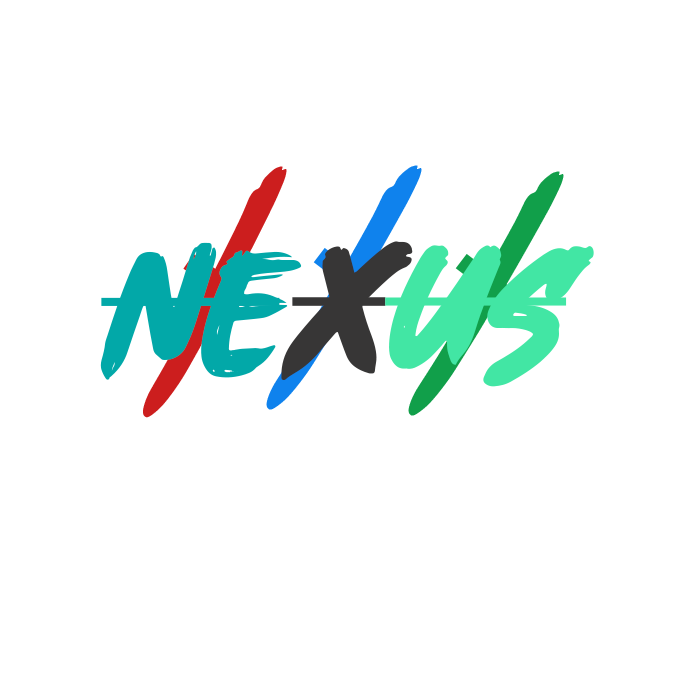
<style>
.page{position:relative;width:700px;height:700px;background:#ffffff}
.page>*{position:absolute;margin:0}
.t1{font:359.6px "Wkwkwk";color:#cc1e1e;font-style:italic;scale:0.33 1}
.t2{font:359.6px "Wkwkwk";font-style:italic;scale:0.33 1}
.t3{font:359.6px "Wkwkwk";color:#119f4a;font-style:italic;scale:0.33 1}
.t4{font:160px "Wkwkwk";color:#02a8a8;font-style:italic}
.t5{font:170.1px "Wkwkwk";color:#373636;font-style:italic;scale:1.06 1}
.t6{font:160px "Wkwkwk";color:#42e6a4;font-style:italic}
</style>
<div class="page">
<p class="t1" style="left:143px;top:166px;width:144px;height:252px;rotate:35deg">\</p>
<p class="t2" style="left:266px;top:165px;width:156px;height:245px;rotate:37deg">\</p>
<p class="t3" style="left:408px;top:171px;width:156px;height:245px;rotate:37deg">\</p>
<p class="t4" style="left:100px;top:242px;width:202px;height:138px">Ne</p>
<p class="t5" style="left:281px;top:241px;width:132px;height:139px">x</p>
<p class="t6" style="left:385px;top:245px;width:209px;height:142px">us</p>
</div>
